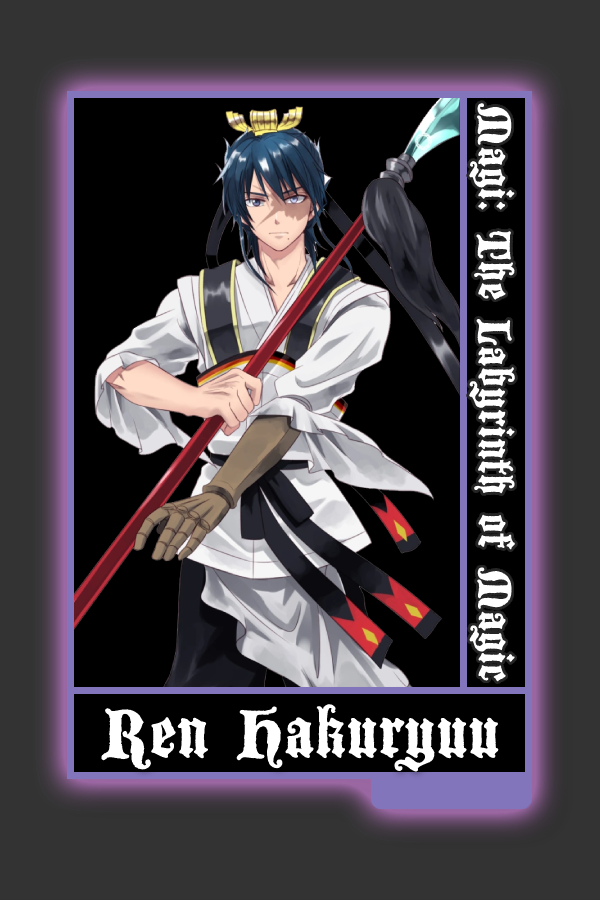
<style>
.page{position:relative;width:600px;height:900px;background:#000000}
.page>*{position:absolute;margin:0}
.t1{font:50px "BlackwoodCastle";color:#ffffff}
.t2{font:75px "BlackwoodCastle";color:#ffffff}
</style>
<div class="page">
<p class="t1" style="left:469px;top:103px;width:46px;height:579px;rotate:90deg">Magi: The Labyrinth of Magic</p>
<p class="t2" style="left:101px;top:704px;width:398px;height:68px">Ren Hakuryuu</p>
</div>
